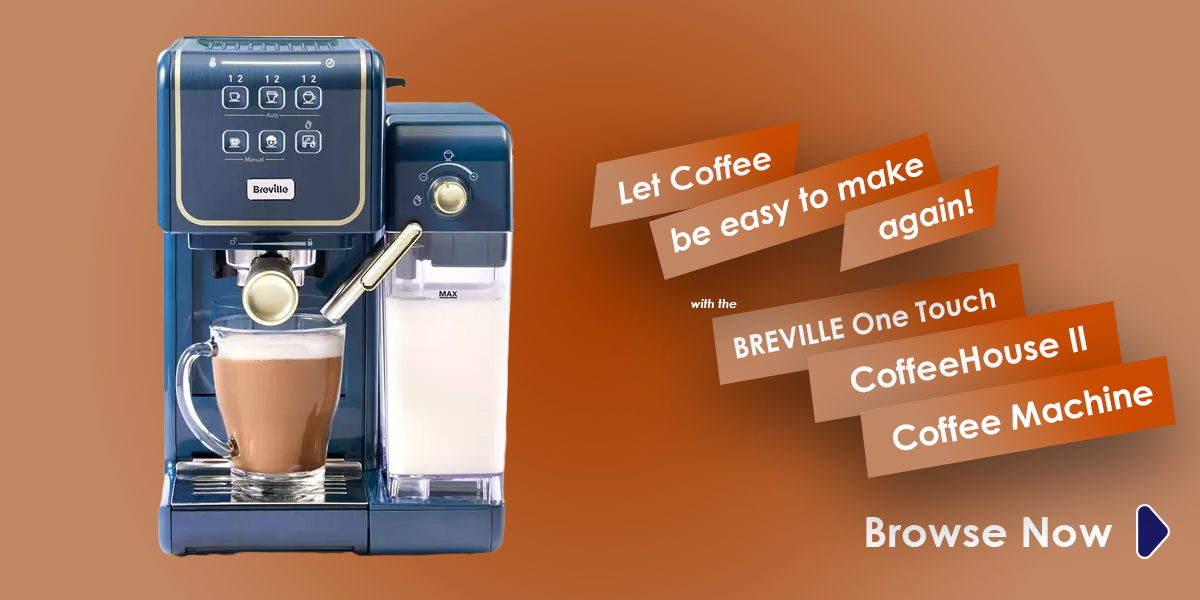
<style>
.page{position:relative;width:1200px;height:600px}
.page>*{position:absolute;margin:0}
.t1{font:31.2px "CenturyGothic-BoldItalic";color:#ffffff;scale:1.03 1}
.t2{font:32.3px "CenturyGothic-BoldItalic";color:#ffffff}
.t3{font:28.7px "CenturyGothic-Bold";color:#ffffff}
.t4{font:12.3px "CenturyGothic-BoldItalic";color:#ffffff}
.t5{font:34.1px "CenturyGothic-Bold";color:#ffffff}
.t6{font:42.4px "CenturyGothic-Bold";color:#ffffff}
</style>
<div class="page">
<p class="t1" style="left:618px;top:152px;width:153px;height:53px;rotate:-14deg">Let Coffee</p>
<p class="t2" style="left:671px;top:158px;width:253px;height:95px;rotate:-18deg">be easy to make</p>
<p class="t2" style="left:879px;top:189px;width:95px;height:51px;rotate:-18deg">again!</p>
<p class="t3" style="left:733px;top:288px;width:263px;height:71px;rotate:-11deg">BREVILLE One Touch</p>
<p class="t4" style="left:691px;top:299px;width:46px;height:9px">with the</p>
<p class="t5" style="left:851px;top:325px;width:236px;height:68px;rotate:-11deg">CoffeeHouse II</p>
<p class="t5" style="left:893px;top:386px;width:260px;height:65px;rotate:-11deg">Coffee Machine</p>
<p class="t6" style="left:866px;top:517px;width:247px;height:30px">Browse Now</p>
</div>
